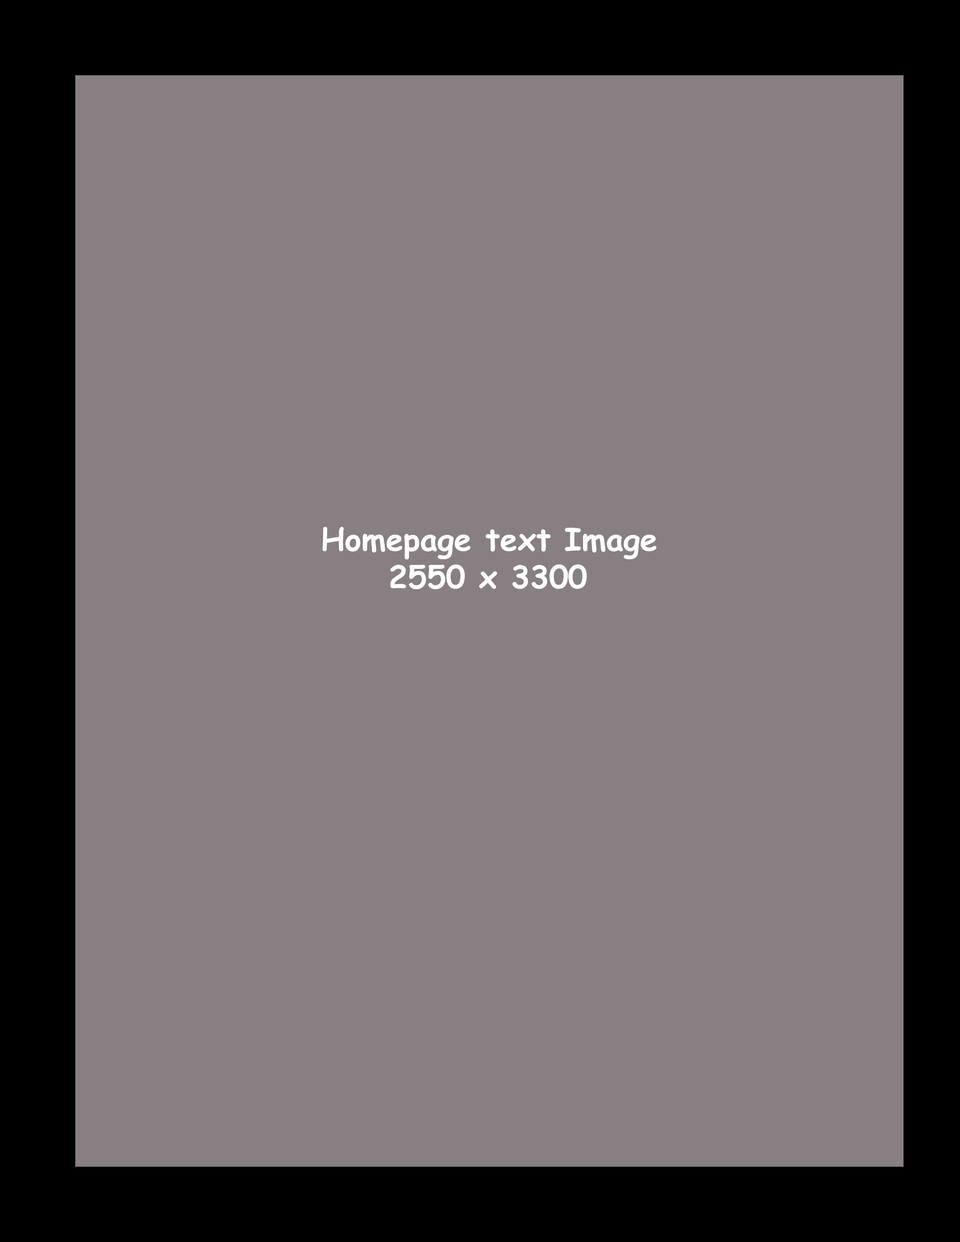
<style>
.page{position:relative;width:960px;height:1242px;background:#887f82}
.page>*{position:absolute;margin:0}
.t1{font:31.4px "ComicSansMS-Bold";color:#ffffff}
</style>
<div class="page">
<p class="t1" style="left:322px;top:527px;width:335px;height:62px">Homepage text Image<br>     2550 x 3300</p>
</div>
